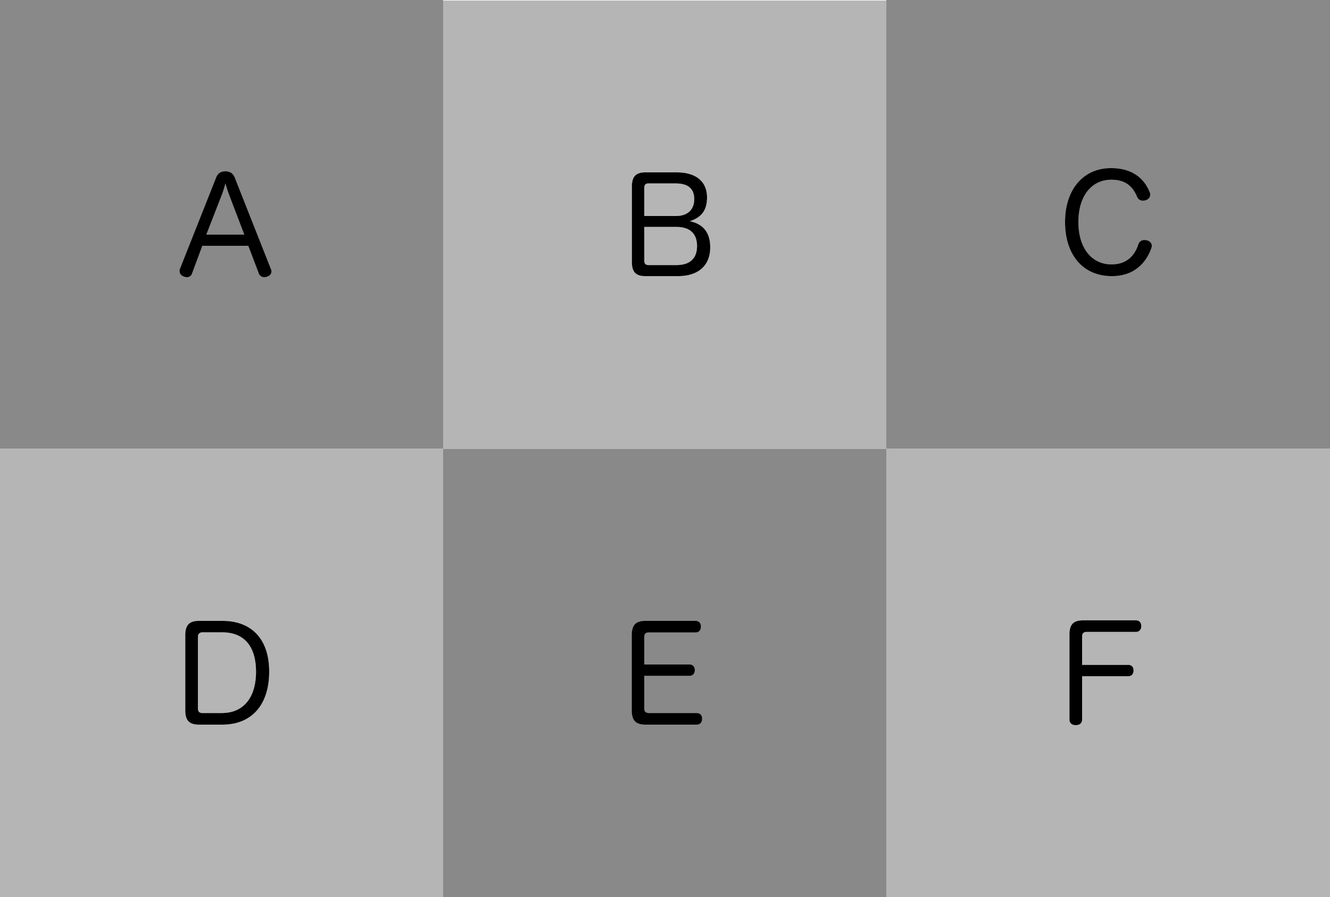
<style>
.page{position:relative;width:1330px;height:897px;background:#898989}
.page>*{position:absolute;margin:0}
.t1{font:133px "HiraMaruPro-W4";color:#000000}
</style>
<div class="page">
<p class="t1" style="left:179px;top:171px;width:93px;height:106px">A</p>
<p class="t1" style="left:631px;top:172px;width:79px;height:104px">B</p>
<p class="t1" style="left:1065px;top:168px;width:87px;height:108px">C</p>
<p class="t1" style="left:185px;top:621px;width:84px;height:103px">D</p>
<p class="t1" style="left:631px;top:621px;width:71px;height:103px">E</p>
<p class="t1" style="left:1069px;top:620px;width:72px;height:105px">F</p>
</div>
